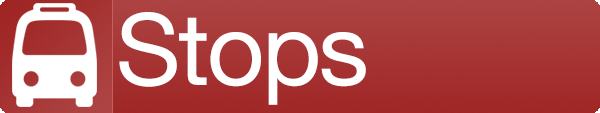
<style>
.page{position:relative;width:600px;height:113px}
.page>*{position:absolute;margin:0}
.t1{font:100px "HelveticaNeue";letter-spacing:-0.025em;color:#ffffff}
</style>
<div class="page">
<p class="t1" style="left:119px;top:12px;width:247px;height:93px">Stops</p>
</div>
